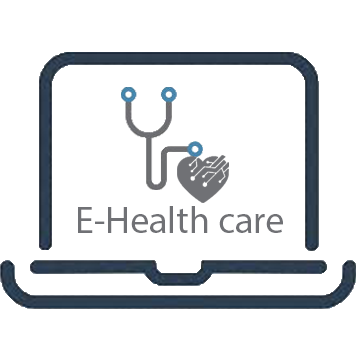
<style>
.page{position:relative;width:360px;height:360px;background:#ffffff}
.page>*{position:absolute;margin:0}
.t1{font:37.9px "MyriadPro-Regular";color:#707175}
</style>
<div class="page">
<p class="t1" style="left:78px;top:206px;width:205px;height:27px">E-Health care</p>
</div>
